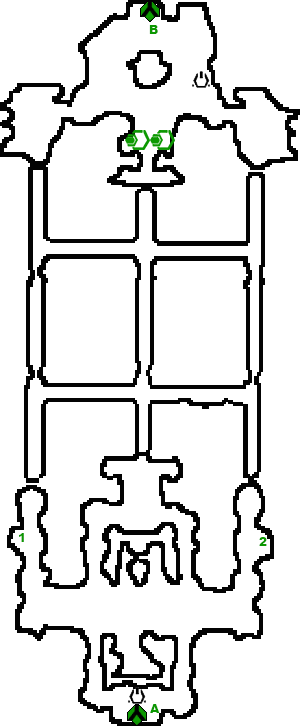
<style>
.page{position:relative;width:300px;height:726px;background:#ffffff}
.page>*{position:absolute;margin:0}
.t1{font:12px "Arial-Black";color:#0c9801}
</style>
<div class="page">
<p class="t1" style="left:149px;top:25px;width:9px;height:9px">B</p>
<p class="t1" style="left:19px;top:533px;width:5px;height:9px">1</p>
<p class="t1" style="left:259px;top:537px;width:8px;height:9px">2</p>
<p class="t1" style="left:150px;top:704px;width:10px;height:9px">A</p>
</div>
